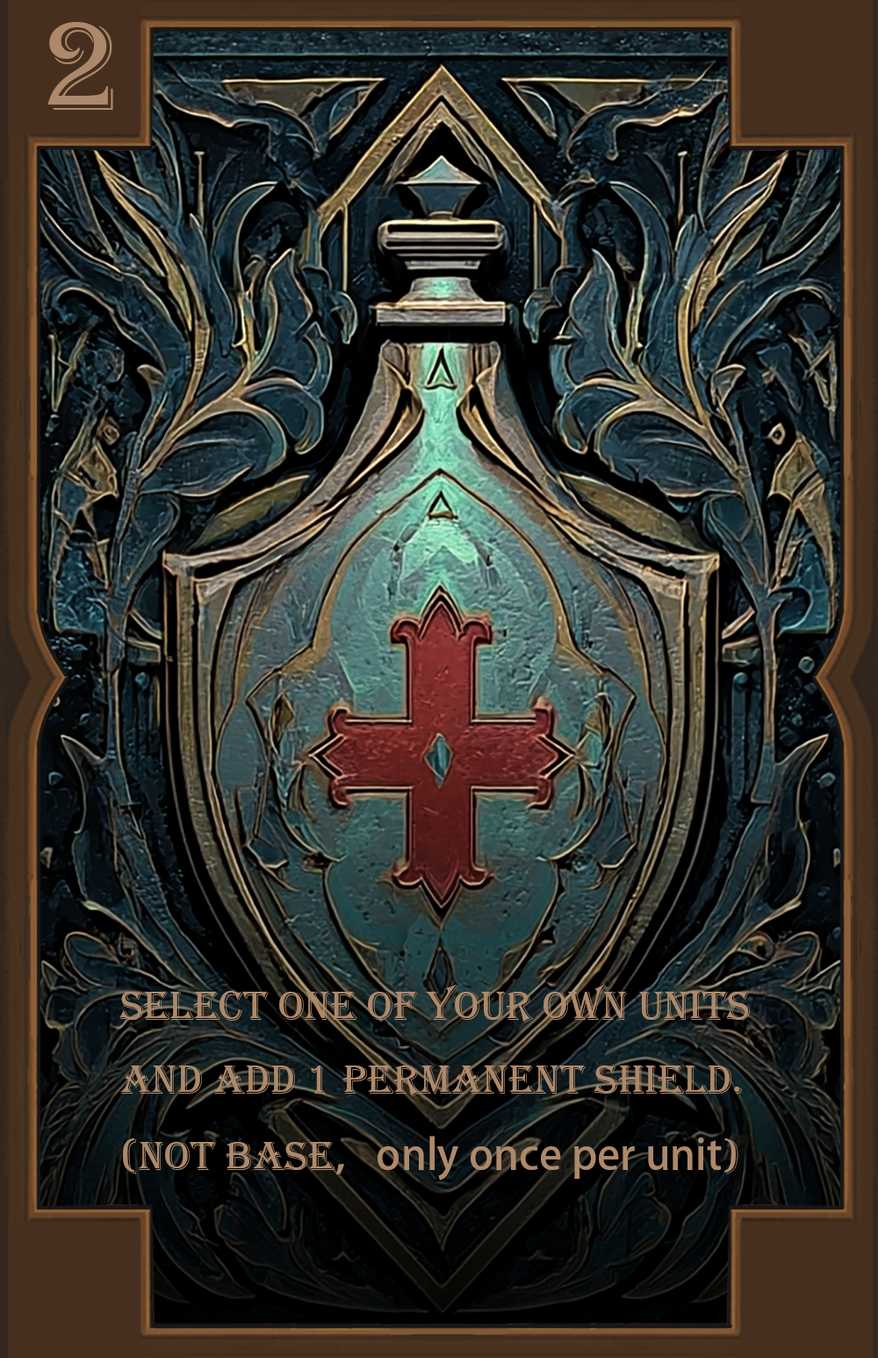
<style>
.page{position:relative;width:878px;height:1358px}
.page>*{position:absolute;margin:0}
.t1{font:131.7px "Algerian";color:#ad896b}
.t2{font:42.2px "Algerian";color:#ad896b}
.t3{font:42.2px "AdobeHeitiStd-Regular";color:#ad896b}
</style>
<div class="page">
<p class="t1" style="left:47px;top:22px;width:66px;height:88px">2</p>
<p class="t2" style="left:119px;top:984px;width:632px;height:196px">Select one of your own units <br>and add 1 permanent shield.<br>(not base<span class="t3">，only once per unit</span>)</p>
</div>
